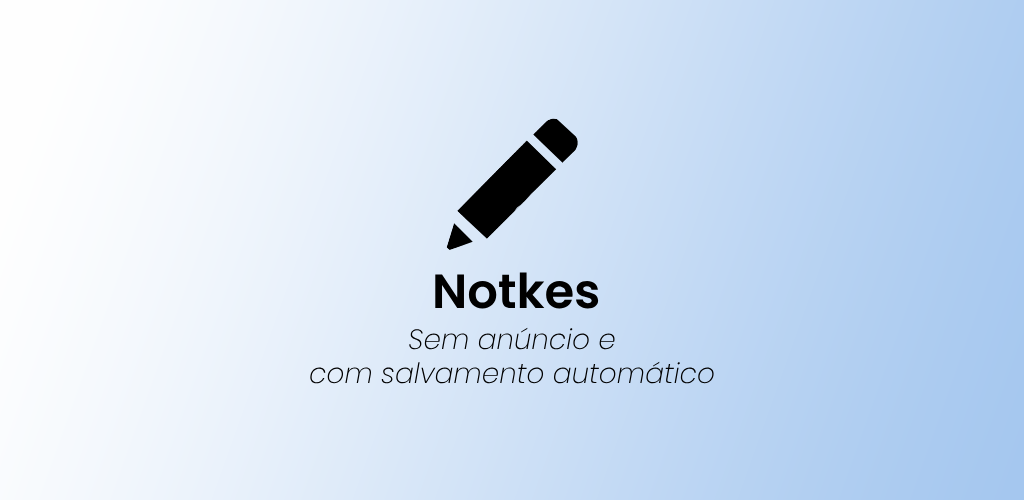
<style>
.page{position:relative;width:1024px;height:500px}
.page>*{position:absolute;margin:0}
.t1{font:48px "Poppins-SemiBold";color:#000000}
.t2{font:28px "Poppins-ExtraLightItalic";color:#000000}
</style>
<div class="page">
<p class="t1" style="left:435px;top:272px;width:164px;height:37px">Notkes</p>
<p class="t2" style="left:309px;top:327px;width:405px;height:57px;text-align:center">Sem anúncio e<br>com salvamento automático</p>
</div>
